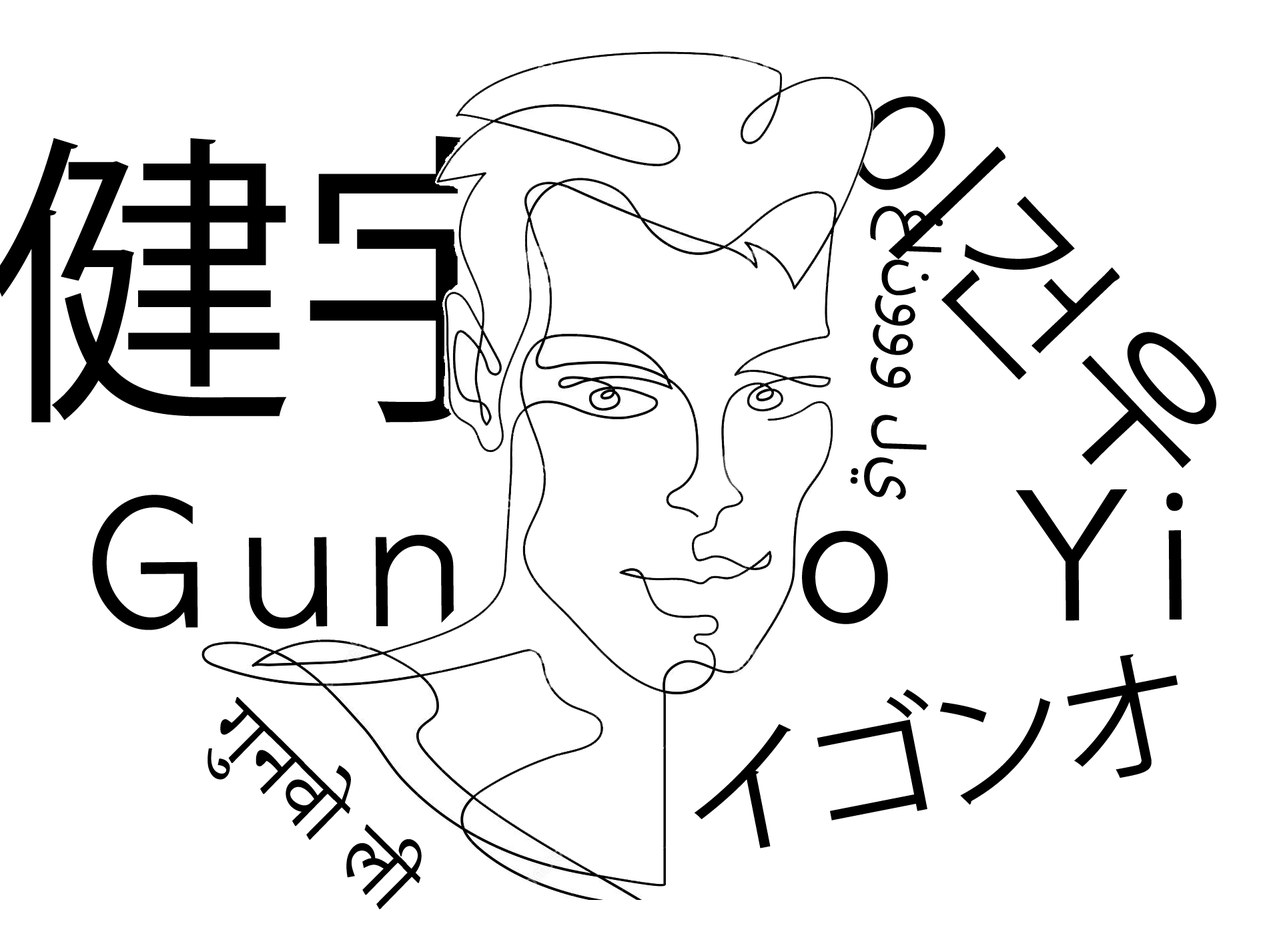
<style>
.page{position:relative;width:1261px;height:946px;background:#ffffff}
.page>*{position:absolute;margin:0}
.t1{font:166.6px "AppleGothic";color:#000000}
.t2{font:91.5px "MyriadArabic-Regular";color:#000000}
.t3{font:166.4px "AppleGothic";letter-spacing:0.2em;color:#000000}
.t4{font:136.6px "KozGoPr6N-Regular";color:#000000}
.t5{font:101.1px "AdobeDevanagari-Regular";color:#000000}
</style>
<div class="page">
<p class="t1" style="left:851px;top:96px;width:365px;height:372px;rotate:46deg">이건우</p>
<p class="t2" style="left:850px;top:206px;width:93px;height:294px;rotate:94deg">غانووو لي</p>
<p class="t3" style="left:92px;top:489px;width:1091px;height:141px">Gunwoo Yi</p>
<p class="t4" style="left:694px;top:654px;width:484px;height:194px;rotate:-11deg">イゴンオ</p>
<p class="t5" style="left:208px;top:697px;width:214px;height:212px;rotate:45deg">गुनवो ली</p>
</div>
